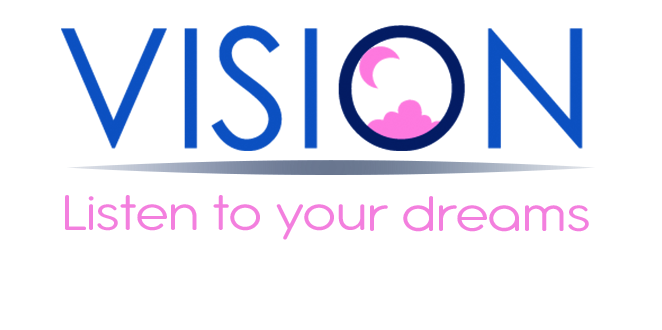
<style>
.page{position:relative;width:662px;height:330px;background:#ffffff}
.page>*{position:absolute;margin:0}
.t1{font:54.7px "AntipastoPro";color:#ff7ae0;scale:1.14 1}
</style>
<div class="page">
<p class="t1" style="left:65px;top:195px;width:524px;height:45px">Listen to your dreams</p>
</div>
